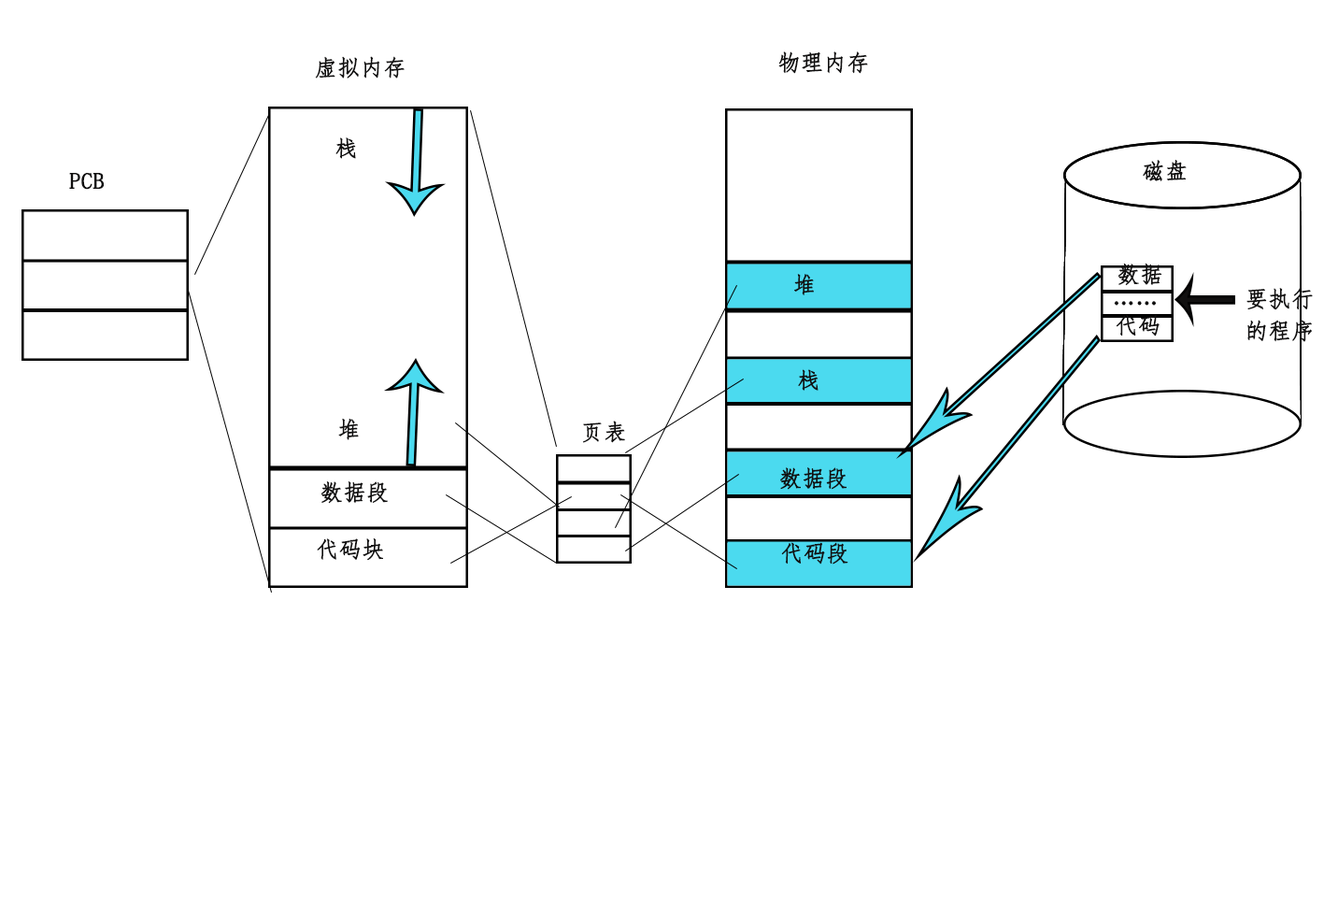
<style>
.page{position:relative;width:1324px;height:901px;background:#ffffff}
.page>*{position:absolute;margin:0}
.t1{font:22.4px "FangSong";color:#111010;font-weight:bold}
</style>
<div class="page">
<p class="t1" style="left:778px;top:51px;width:90px;height:23px">物理内存</p>
<p class="t1" style="left:315px;top:56px;width:90px;height:22px">虚拟内存</p>
<p class="t1" style="left:335px;top:137px;width:21px;height:22px">栈</p>
<p class="t1" style="left:1143px;top:160px;width:44px;height:21px">磁盘</p>
<p class="t1" style="left:69px;top:173px;width:35px;height:17px">PCB</p>
<p class="t1" style="left:1117px;top:263px;width:45px;height:23px">数据</p>
<p class="t1" style="left:794px;top:274px;width:20px;height:21px">堆</p>
<p class="t1" style="left:1246px;top:288px;width:67px;height:22px">要执行</p>
<p class="t1" style="left:1114px;top:301px;width:43px;height:5px">……</p>
<p class="t1" style="left:1116px;top:314px;width:43px;height:22px">代码</p>
<p class="t1" style="left:1247px;top:320px;width:65px;height:22px">的程序</p>
<p class="t1" style="left:798px;top:369px;width:20px;height:22px">栈</p>
<p class="t1" style="left:338px;top:419px;width:21px;height:21px">堆</p>
<p class="t1" style="left:583px;top:420px;width:42px;height:23px">页表</p>
<p class="t1" style="left:780px;top:467px;width:66px;height:23px">数据段</p>
<p class="t1" style="left:320px;top:481px;width:68px;height:23px">数据段</p>
<p class="t1" style="left:317px;top:538px;width:66px;height:23px">代码块</p>
<p class="t1" style="left:781px;top:542px;width:67px;height:22px">代码段</p>
</div>
